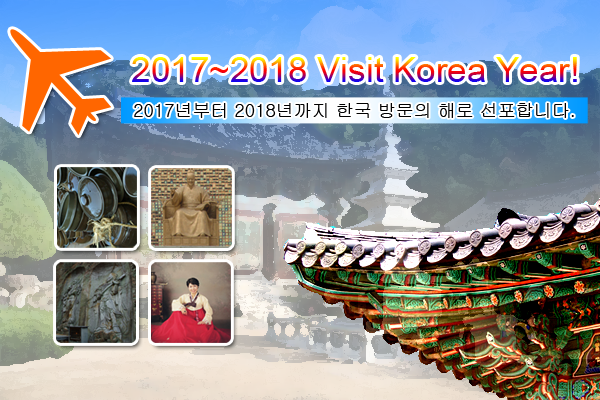
<style>
.page{position:relative;width:600px;height:400px}
.page>*{position:absolute;margin:0}
.t1{font:35px "ArialMT"}
.t2{font:18px "Gulim";color:#000000}
</style>
<div class="page">
<p class="t1" style="left:132px;top:57px;width:445px;height:25px">2017~2018 Visit Korea Year!</p>
<p class="t2" style="left:134px;top:103px;width:440px;height:15px">2017년부터 2018년까지 한국 방문의 해로 선포합니다.</p>
</div>
